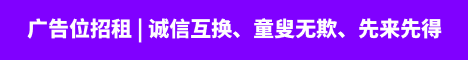
<style>
.page{position:relative;width:468px;height:60px;background:#8000ff}
.page>*{position:absolute;margin:0}
.t1{font:21px "SourceHanSansSC-Heavy";color:#fefefe}
</style>
<div class="page">
<p class="t1" style="left:27px;top:18px;width:415px;height:25px">广告位招租 | 诚信互换、童叟无欺、先来先得</p>
</div>
